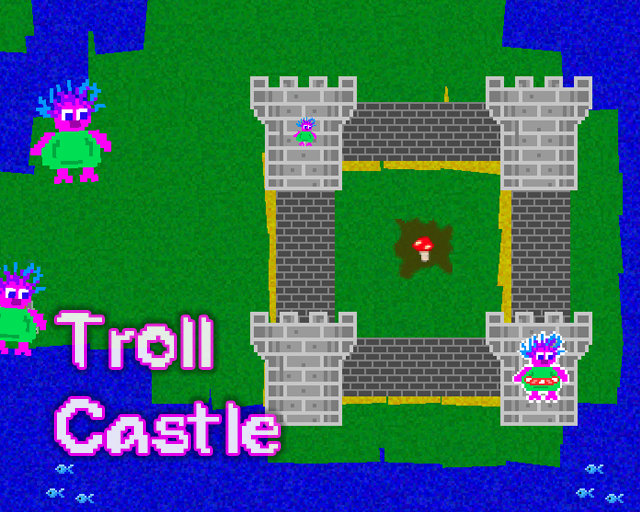
<style>
.page{position:relative;width:640px;height:512px}
.page>*{position:absolute;margin:0}
.t1{font:72px "TooMuchInk";color:#e4e5f5}
</style>
<div class="page">
<p class="t1" style="left:57px;top:313px;width:221px;height:140px">Troll<br>Castle</p>
</div>
